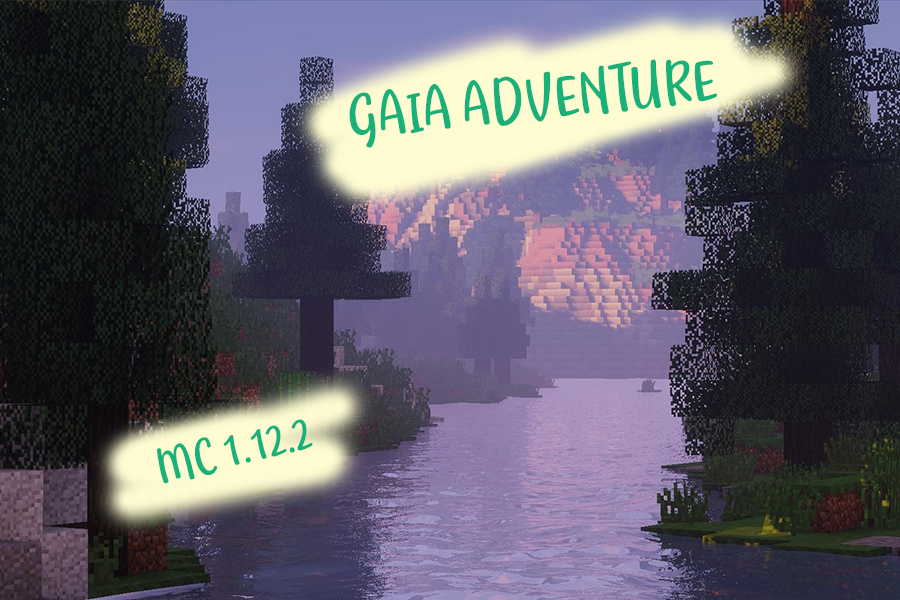
<style>
.page{position:relative;width:900px;height:600px}
.page>*{position:absolute;margin:0}
.t1{font:58.3px "LadyNature";letter-spacing:0.04em;color:#18b179}
.t2{font:45.8px "LadyNature";letter-spacing:0.04em;color:#18b179}
</style>
<div class="page">
<p class="t1" style="left:349px;top:59px;width:369px;height:89px;rotate:-7deg">GAIA ADVENTURE</p>
<p class="t2" style="left:157px;top:419px;width:156px;height:65px;rotate:-13deg">MC 1.12.2</p>
</div>
